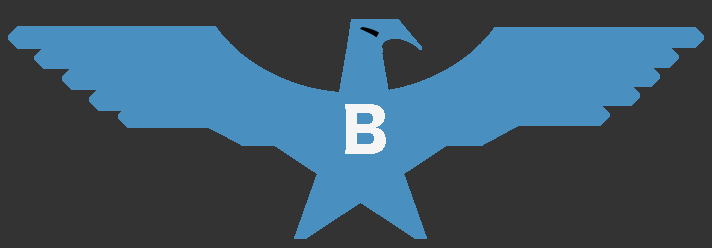
<style>
.page{position:relative;width:712px;height:248px;background:#333333}
.page>*{position:absolute;margin:0}
.t1{font:60px "HiraKakuStdN-W8";color:#f5f5f5}
</style>
<div class="page">
<p class="t1" style="left:345px;top:104px;width:41px;height:50px">B</p>
</div>
